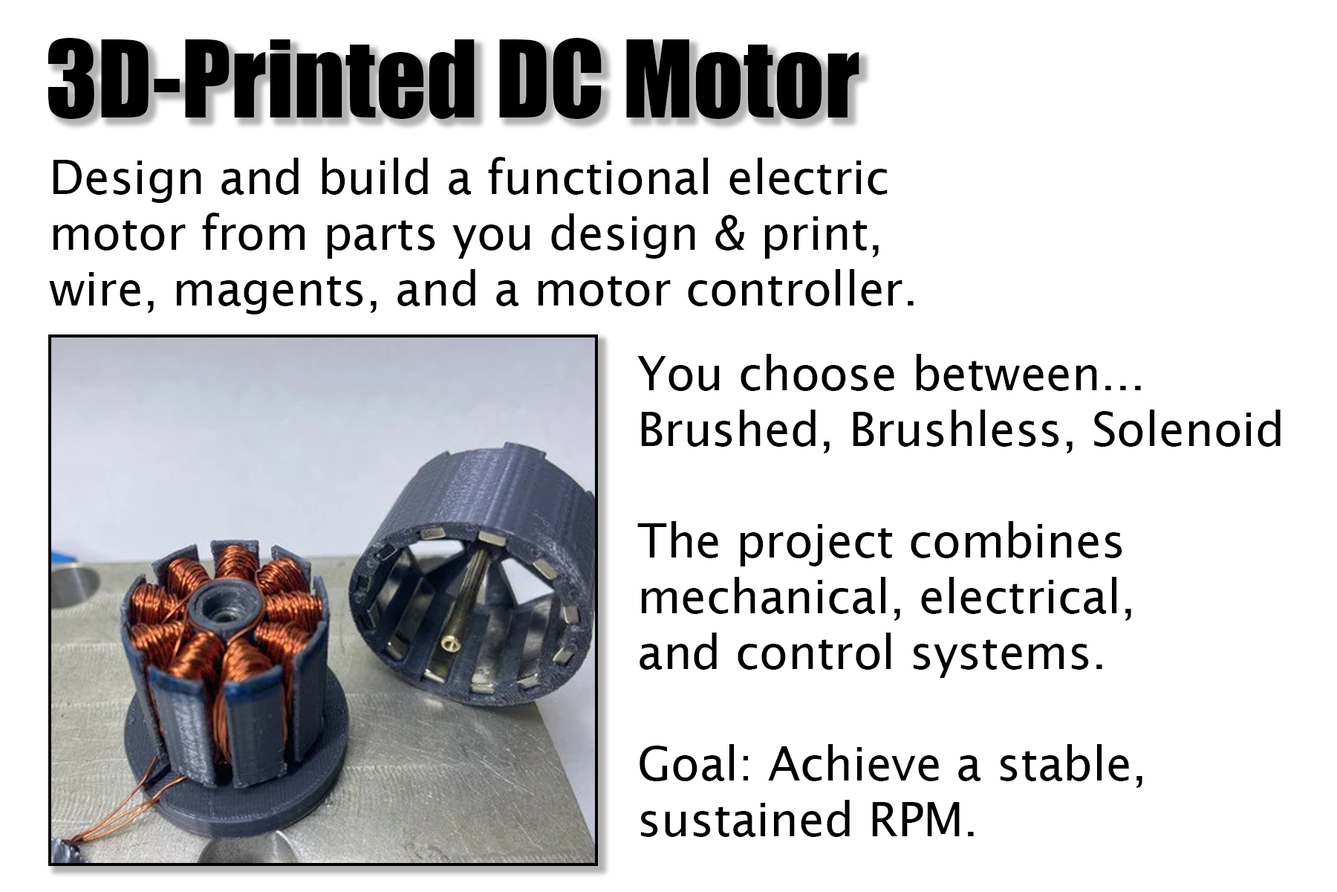
<style>
.page{position:relative;width:1337px;height:892px;background:#ffffff}
.page>*{position:absolute;margin:0}
.t1{font:99.1px "Impact";color:#000000}
.t2{font:46.4px "LucidaSans";color:#000000}
</style>
<div class="page">
<p class="t1" style="left:48px;top:38px;width:812px;height:81px">3D-Printed DC Motor</p>
<p class="t2" style="left:49px;top:157px;width:865px;height:157px">Design and build a functional electric<br>motor from parts you design &amp; print,<br>wire, magents, and a motor controller.</p>
<p class="t2" style="left:637px;top:354px;width:644px;height:483px">You choose between...<br>Brushed, Brushless, Solenoid<br><br>The project combines <br>mechanical, electrical, <br>and control systems.<br><br>Goal: Achieve a stable, <br>sustained RPM.</p>
</div>
